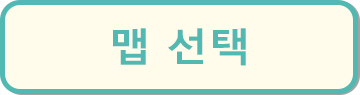
<style>
.page{position:relative;width:360px;height:95px;background:#fffceb}
.page>*{position:absolute;margin:0}
.t1{font:39.6px "MalgunGothicBold";letter-spacing:0.01em;color:#51b8b2;scale:1.05 1}
</style>
<div class="page">
<p class="t1" style="left:113px;top:28px;width:133px;height:38px">맵 선택</p>
</div>
